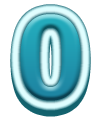
<style>
.page{position:relative;width:100px;height:122px;background:#ffffff}
.page>*{position:absolute;margin:0}
.t1{font:117.6px "Arial-BoldMT";scale:1.09 1}
</style>
<div class="page">
<p class="t1" style="left:20px;top:14px;width:61px;height:87px">0</p>
<p class="t1" style="left:20px;top:20px;width:61px;height:87px">0</p>
</div>
